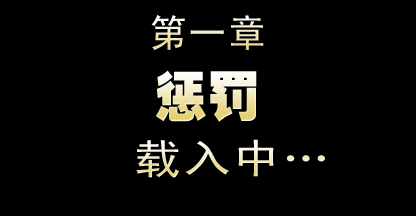
<style>
.page{position:relative;width:416px;height:216px;background:#000000}
.page>*{position:absolute;margin:0}
.t1{font:38px "SimHei";letter-spacing:0.03em;text-transform:uppercase}
.t2{font:53px "HeitiEG-Ultra-GB";text-transform:uppercase}
.t3{font:40.9px "SimHei";letter-spacing:0.03em;scale:1.18 1}
</style>
<div class="page">
<p class="t1" style="left:151px;top:14px;width:113px;height:36px">第一章</p>
<p class="t2" style="left:155px;top:70px;width:102px;height:52px">惩罚</p>
<p class="t3" style="left:136px;top:139px;width:189px;height:39px">载入中…</p>
</div>
